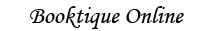
<style>
.page{position:relative;width:216px;height:31px;background:#ffffff}
.page>*{position:absolute;margin:0}
.t1{font:25px "MonotypeCorsiva";color:#000000}
</style>
<div class="page">
<p class="t1" style="left:30px;top:6px;width:154px;height:23px">Booktique Online</p>
</div>
